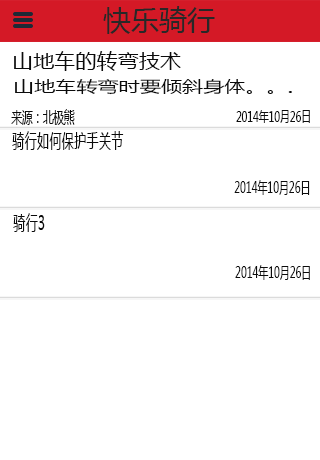
<style>
.page{position:relative;width:320px;height:460px;background:#ffffff}
.page>*{position:absolute;margin:0}
.t1{font:28px "MicrosoftYaHei";color:#282828}
.t2{font:20px "MicrosoftYaHei";color:#0b0b0b;scale:1.06 1}
.t3{font:15.5px "MicrosoftYaHei";color:#0b0b0b;scale:1.36 1}
.t4{font:10.5px "MicrosoftYaHei";color:#0b0b0b;scale:1.36 1}
.t5{font:15.8px "MicrosoftYaHei";color:#0b0b0b;scale:0.67 1}
.t6{font:14.8px "MicrosoftYaHei";color:#0b0b0b;scale:0.66 1}
.t7{font:20px "MicrosoftYaHei";color:#0b0b0b;scale:0.62 1}
.t8{font:16px "MicrosoftYaHei";color:#0b0b0b;scale:0.62 1}
</style>
<div class="page">
<p class="t1" style="left:103px;top:6px;width:112px;height:28px">快乐骑行</p>
<p class="t2" style="left:14px;top:51px;width:167px;height:20px">山地车的转弯技术</p>
<p class="t3" style="left:15px;top:79px;width:277px;height:16px">山地车转弯时要倾斜身体。。<span class="t4">。</span></p>
<p class="t5" style="left:11px;top:109px;width:64px;height:16px">来源：北极熊</p>
<p class="t6" style="left:236px;top:110px;width:74px;height:13px">2014年10月26日</p>
<p class="t7" style="left:12px;top:131px;width:112px;height:19px">骑行如何保护手关节</p>
<p class="t8" style="left:234px;top:180px;width:76px;height:15px">2014年10月26日</p>
<p class="t7" style="left:13px;top:213px;width:32px;height:19px">骑行3</p>
<p class="t8" style="left:235px;top:265px;width:75px;height:15px">2014年10月26日</p>
</div>
